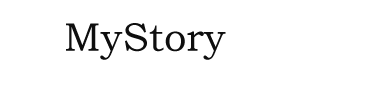
<style>
.page{position:relative;width:385px;height:90px;background:#ffffff}
.page>*{position:absolute;margin:0}
.t1{font:40px "BookmanOldStyle";color:#0e0e0e}
</style>
<div class="page">
<p class="t1" style="left:66px;top:23px;width:160px;height:37px">MyStory</p>
</div>
